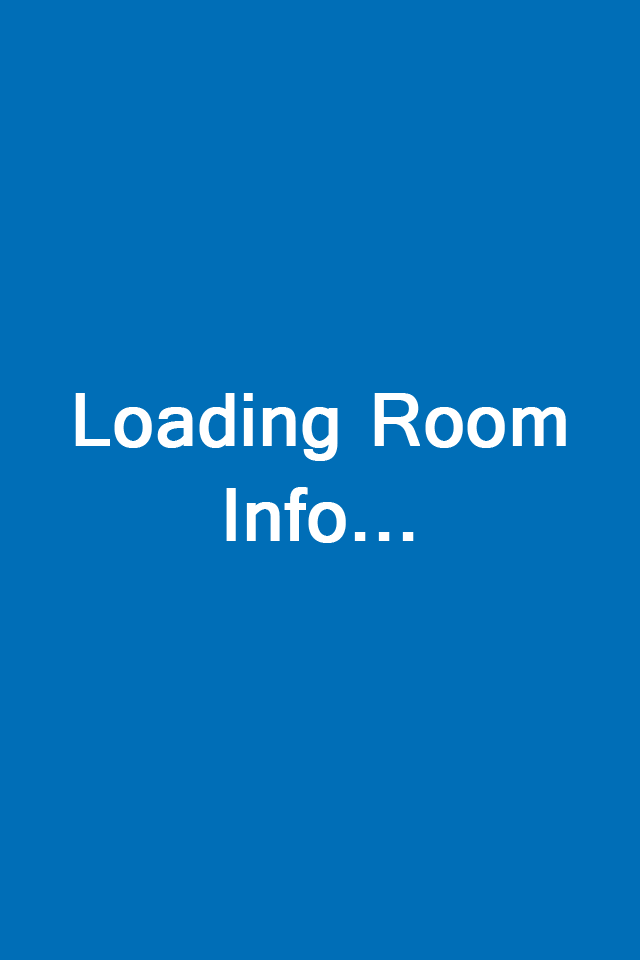
<style>
.page{position:relative;width:640px;height:960px;background:#006eb7}
.page>*{position:absolute;margin:0}
.t1{font:79.9px "Raavi";color:#ffffff;font-weight:bold}
</style>
<div class="page">
<p class="t1" style="left:75px;top:393px;width:491px;height:150px;text-align:center">Loading Room<br>Info...</p>
</div>
